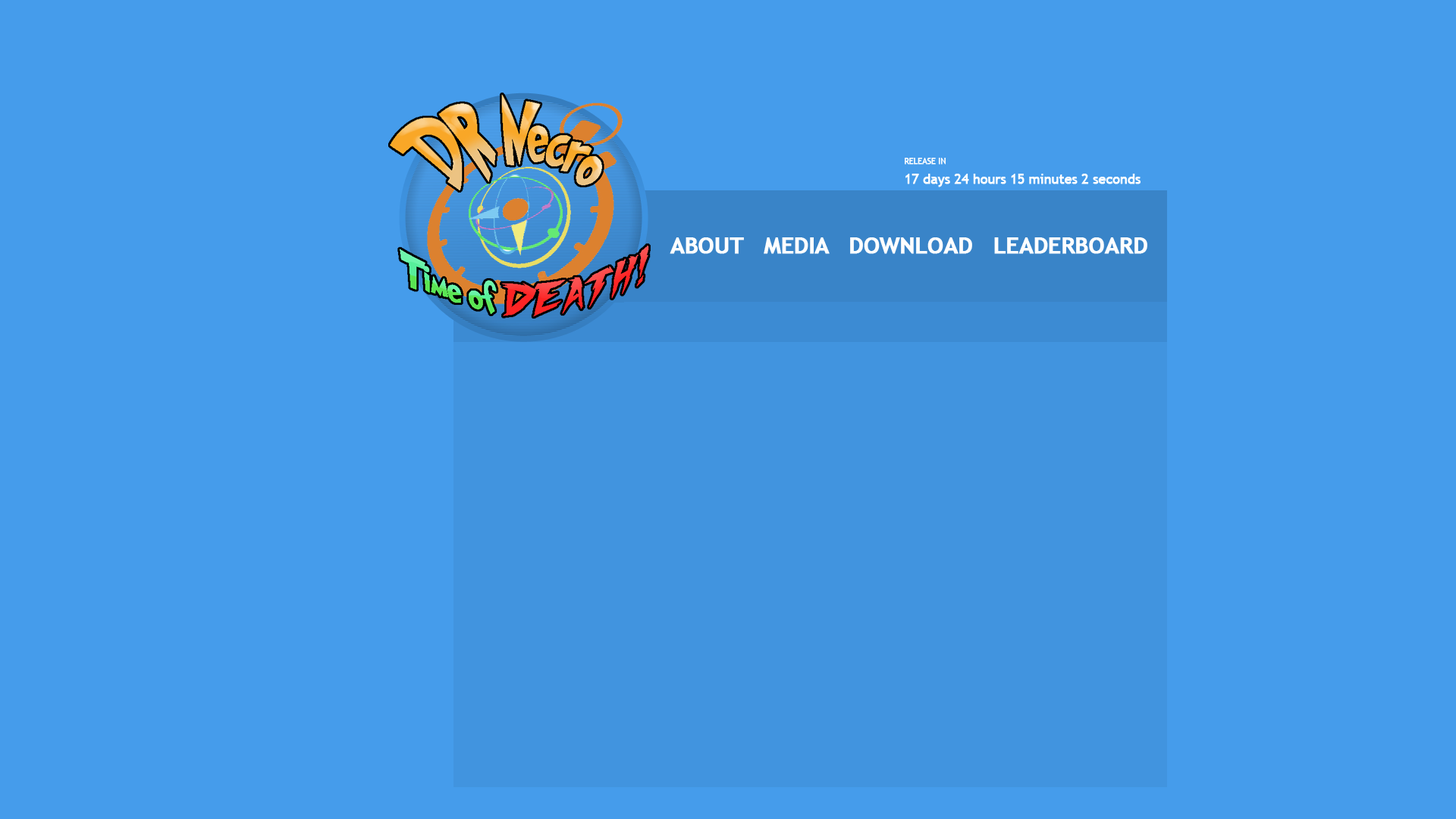
<style>
.page{position:relative;width:1456px;height:819px;background:#459ceb}
.page>*{position:absolute;margin:0}
.t1{font:8.3px "TrebuchetMS";letter-spacing:-0.025em;color:#ffffff;font-weight:bold}
.t2{font:13.6px "TrebuchetMS";letter-spacing:-0.025em;color:#ffffff;font-weight:bold}
.t3{font:22.7px "TrebuchetMS-Bold";letter-spacing:-0.025em;color:#fefefe;font-weight:bold}
</style>
<div class="page">
<p class="t1" style="left:905px;top:158px;width:41px;height:7px">RELEASE IN</p>
<p class="t2" style="left:905px;top:174px;width:236px;height:13px">17 days 24 hours 15 minutes 2 seconds</p>
<p class="t3" style="left:670px;top:237px;width:477px;height:17px">ABOUT   MEDIA   DOWNLOAD   LEADERBOARD</p>
</div>
